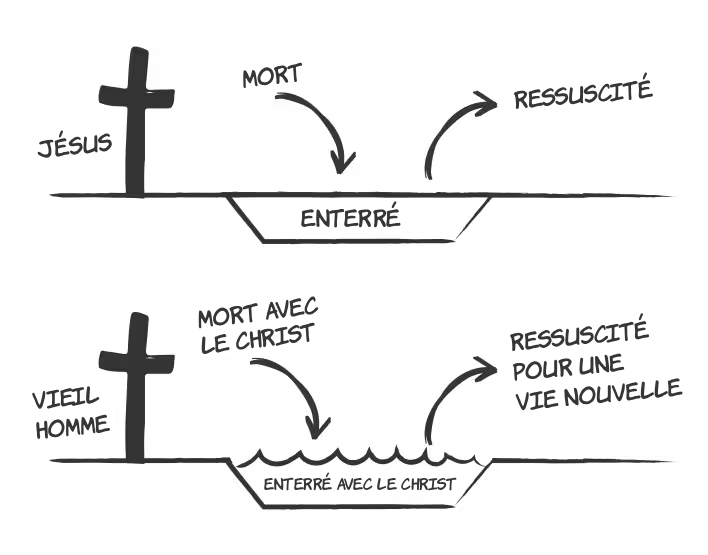
<style>
.page{position:relative;width:708px;height:555px;background:#ffffff}
.page>*{position:absolute;margin:0}
.t1{font:22px "KomikaHand";color:#363636}
.t2{font:22px/30px "KomikaHand";color:#363636}
.t3{font:15px "KomikaHand";color:#363636}
</style>
<div class="page">
<p class="t1" style="left:243px;top:62px;width:60px;height:27px;rotate:-7deg">MORT</p>
<p class="t1" style="left:513px;top:72px;width:140px;height:38px;rotate:-5deg">RESSUSCITÉ</p>
<p class="t1" style="left:37px;top:130px;width:75px;height:28px;rotate:-6deg">JÉSUS</p>
<p class="t1" style="left:301px;top:201px;width:100px;height:27px">ENTERRÉ</p>
<p class="t1" style="left:198px;top:296px;width:121px;height:59px;rotate:-7deg">MORT AVEC<br>LE CHRIST</p>
<p class="t2" style="left:510px;top:313px;width:173px;height:98px;rotate:-5deg">RESSUSCITÉ<br>POUR UNE<br>VIE NOUVELLE</p>
<p class="t2" style="left:32px;top:386px;width:79px;height:54px;rotate:-6deg">VIEIL<br>HOMME</p>
<p class="t3" style="left:264px;top:472px;width:193px;height:19px">ENTERRÉ AVEC LE CHRIST</p>
</div>
